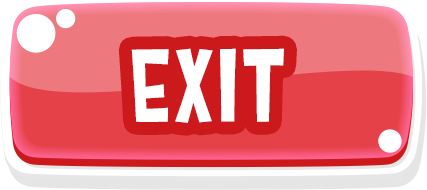
<style>
.page{position:relative;width:427px;height:190px;background:#e54149}
.page>*{position:absolute;margin:0}
.t1{font:100px "Splat2K";letter-spacing:0.01em;color:#ffffff}
</style>
<div class="page">
<p class="t1" style="left:131px;top:48px;width:153px;height:75px">EXIT</p>
</div>
